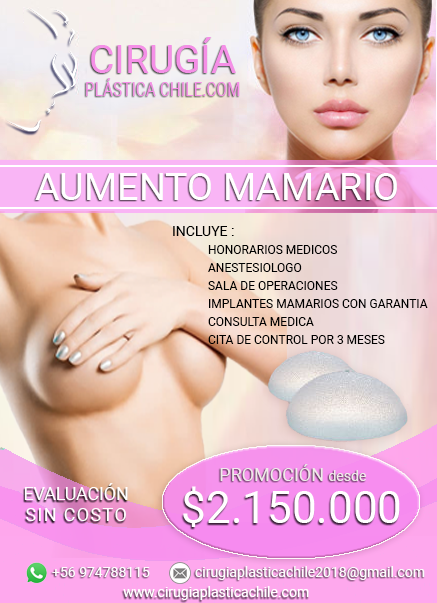
<style>
.page{position:relative;width:437px;height:603px}
.page>*{position:absolute;margin:0}
.t1{font:19.4px "Roboto-Regular";color:#f58fe7;scale:0.8 1}
.t2{font:38.8px "Roboto-Regular";color:#f58fe7}
.t3{font:38px "Roboto-Regular";color:#ffffff}
.t4{font:12px/18px "Roboto-Regular";color:#000000}
.t5{font:14px "Roboto-Regular";color:#000000}
.t6{font:18px "Roboto-Regular";color:#f0eaea}
.t7{font:14px "Roboto-Regular";color:#f0eaea}
.t8{font:18px "Roboto-Regular";letter-spacing:-0.01em;color:#ffffff}
.t9{font:18px "Roboto-Regular";letter-spacing:0.075em;color:#ffffff}
.t10{font:44px "Roboto-Regular";color:#ffffff}
.t11{font:14px "Roboto-Regular";color:#fcfcfc}
.t12{font:14px "Roboto-Regular";color:#ffffff}
</style>
<div class="page">
<p class="t1" style="left:86px;top:37px;width:154px;height:59px;text-align:center"><span class="t2">CIRUGÍA<br></span>PLÁSTICA CHILE.COM</p>
<p class="t3" style="left:35px;top:173px;width:362px;height:27px">AUMENTO MAMARIO</p>
<p class="t4" style="left:173px;top:226px;width:255px;height:118px"><span class="t5">INCLUYE :<br> </span>HONORARIOS MEDICOS<br> ANESTESIOLOGO<br> SALA DE OPERACIONES<br> IMPLANTES MAMARIOS CON GARANTIA<br> CONSULTA MEDICA<br> CITA DE CONTROL POR 3 MESES</p>
<p class="t6" style="left:220px;top:464px;width:146px;height:17px">PROMOCIÓN <span class="t7">desde</span></p>
<p class="t8" style="left:24px;top:483px;width:104px;height:38px;text-align:center">EVALUACIÓN<br><span class="t9">SIN COSTO</span></p>
<p class="t10" style="left:183px;top:486px;width:217px;height:41px">$2.150.000</p>
<p class="t11" style="left:52px;top:566px;width:373px;height:14px">+56 974788115             cirugiaplasticachile2018@gmail.com</p>
<p class="t12" style="left:123px;top:586px;width:186px;height:14px">www.cirugiaplasticachile.com</p>
</div>
